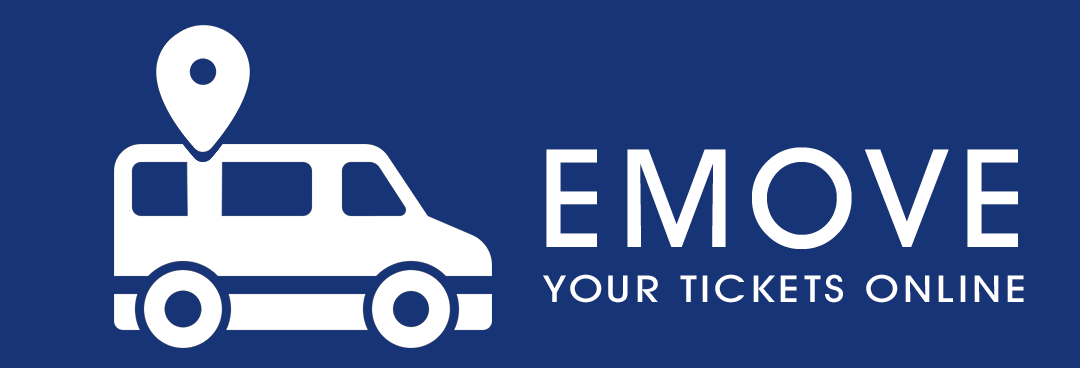
<style>
.page{position:relative;width:1080px;height:368px;background:#173476}
.page>*{position:absolute;margin:0}
.t1{font:137.2px "AvantGardeITCbyBT-Medium";letter-spacing:0.1em;color:#ffffff}
.t2{font:37.3px "AvantGardeITCbyBT-Medium";letter-spacing:0.1em;color:#ffffff;scale:1.14 1}
</style>
<div class="page">
<p class="t1" style="left:546px;top:147px;width:472px;height:102px">EMOVE</p>
<p class="t2" style="left:543px;top:274px;width:481px;height:29px">YOUR TICKETS ONLINE</p>
</div>
